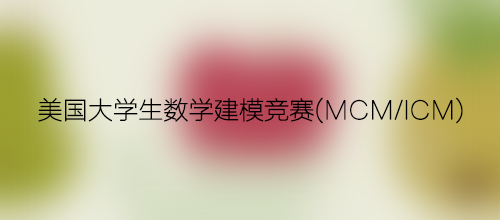
<style>
.page{position:relative;width:500px;height:220px}
.page>*{position:absolute;margin:0}
.t1{font:25px "FZLTCXHJW--GB1-0";letter-spacing:-0.02em;color:#000000;font-weight:bold}
</style>
<div class="page">
<p class="t1" style="left:38px;top:97px;width:425px;height:27px">美国大学生数学建模竞赛(MCM/ICM)</p>
</div>
